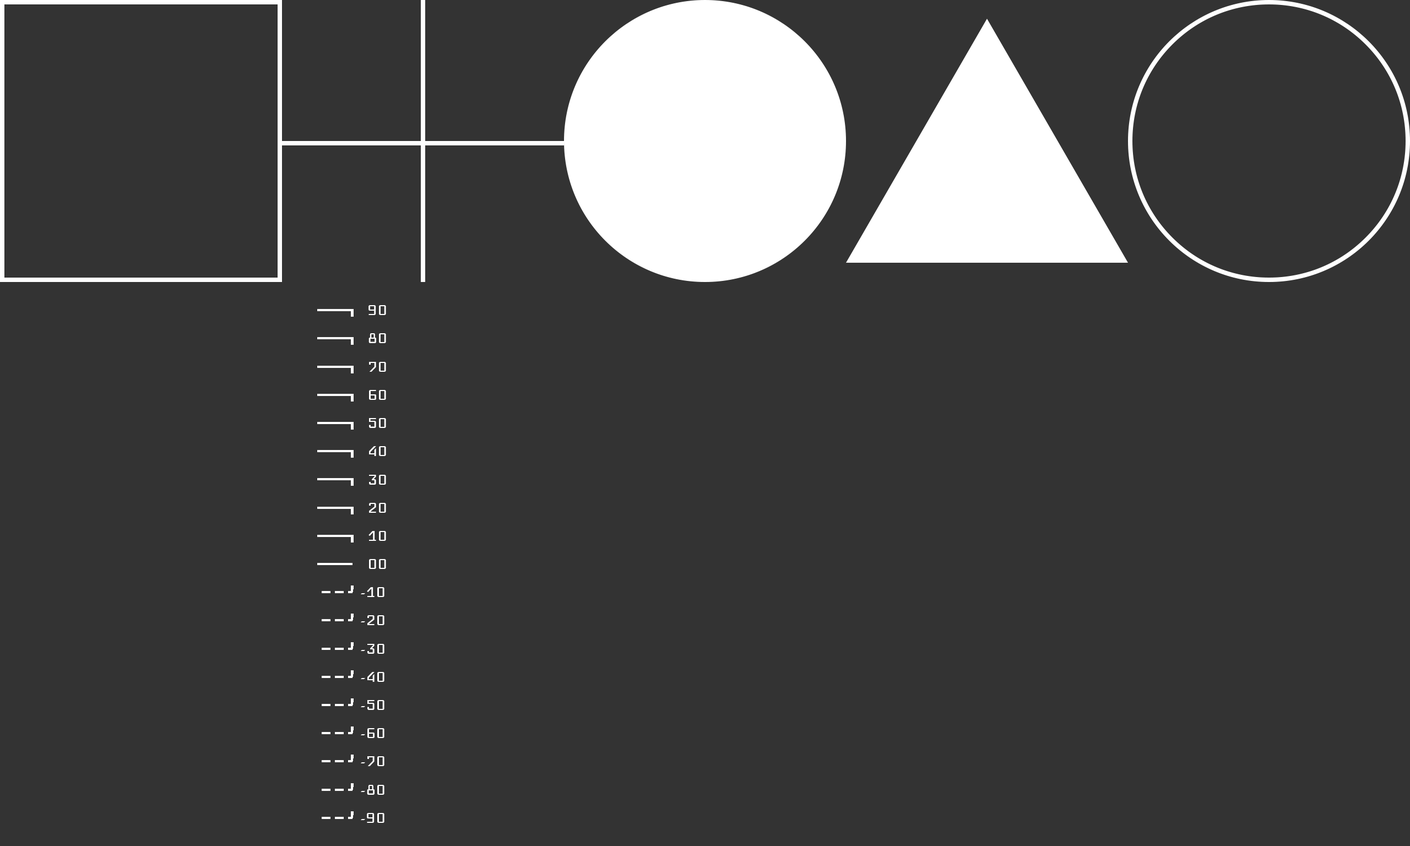
<style>
.page{position:relative;width:1410px;height:846px;background:#333333}
.page>*{position:absolute;margin:0}
.t1{font:19.8px "Iceland-Regular";color:#ffffff}
</style>
<div class="page">
<p class="t1" style="left:368px;top:305px;width:18px;height:10px">90</p>
<p class="t1" style="left:368px;top:333px;width:18px;height:10px">80</p>
<p class="t1" style="left:369px;top:362px;width:17px;height:10px">70</p>
<p class="t1" style="left:369px;top:390px;width:17px;height:10px">60</p>
<p class="t1" style="left:369px;top:418px;width:17px;height:10px">50</p>
<p class="t1" style="left:369px;top:446px;width:17px;height:10px">40</p>
<p class="t1" style="left:369px;top:475px;width:17px;height:10px">30</p>
<p class="t1" style="left:369px;top:503px;width:17px;height:10px">20</p>
<p class="t1" style="left:368px;top:531px;width:18px;height:10px">10</p>
<p class="t1" style="left:369px;top:559px;width:17px;height:10px">00</p>
<p class="t1" style="left:361px;top:587px;width:23px;height:10px">-10</p>
<p class="t1" style="left:361px;top:615px;width:23px;height:10px">-20</p>
<p class="t1" style="left:361px;top:644px;width:23px;height:10px">-30</p>
<p class="t1" style="left:361px;top:672px;width:23px;height:10px">-40</p>
<p class="t1" style="left:361px;top:700px;width:23px;height:10px">-50</p>
<p class="t1" style="left:361px;top:728px;width:23px;height:10px">-60</p>
<p class="t1" style="left:361px;top:756px;width:23px;height:10px">-70</p>
<p class="t1" style="left:361px;top:785px;width:23px;height:10px">-80</p>
<p class="t1" style="left:361px;top:813px;width:23px;height:10px">-90</p>
</div>
